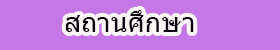
<style>
.page{position:relative;width:280px;height:50px;background:#c577e5}
.page>*{position:absolute;margin:0}
.t1{font:27.8px "Tahoma";color:#09020c}
</style>
<div class="page">
<p class="t1" style="left:65px;top:10px;width:129px;height:22px">สถานศึกษา</p>
</div>
